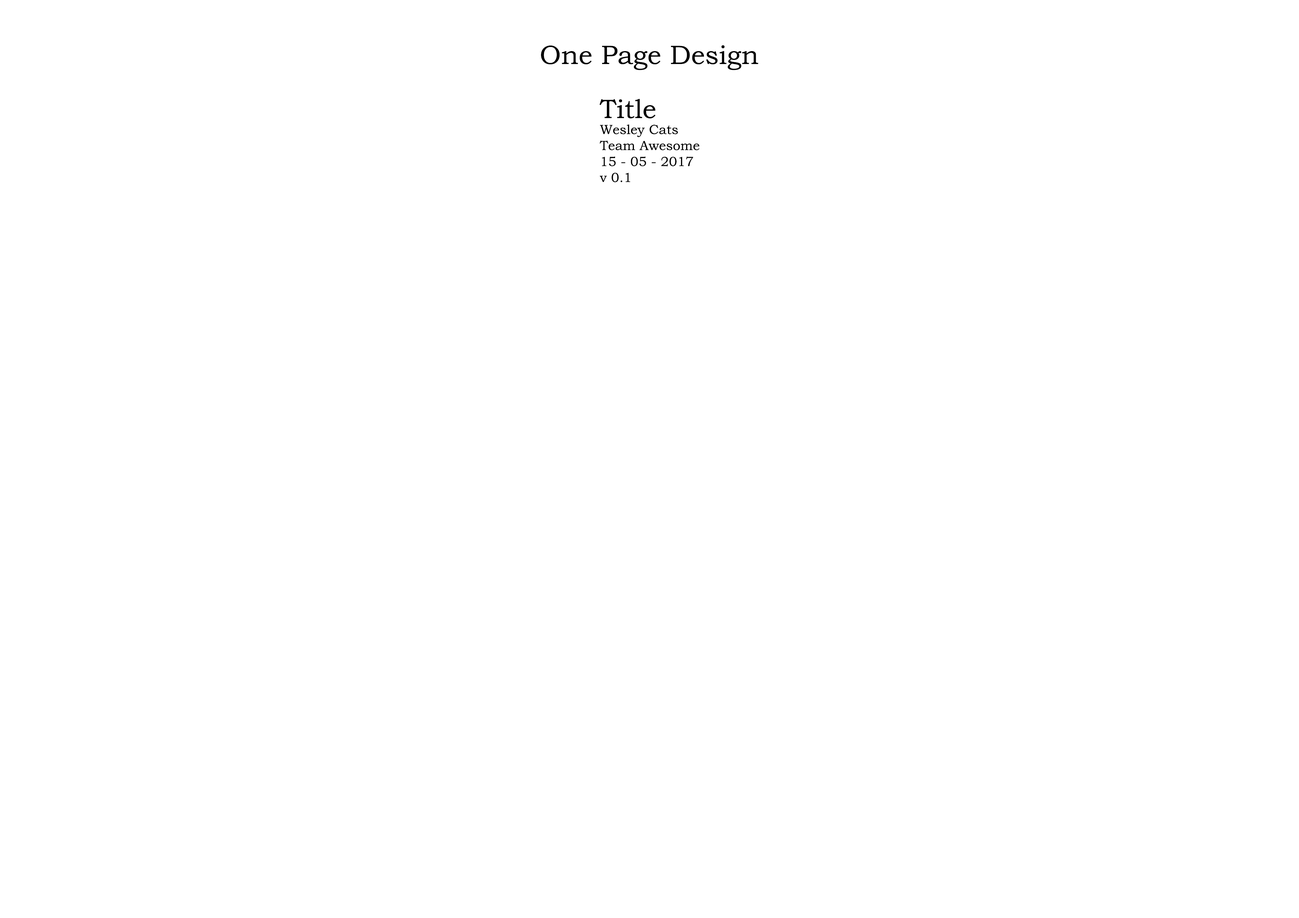
<style>
.page{position:relative;width:1299px;height:918px;background:#ffffff}
.page>*{position:absolute;margin:0}
.t1{font:26.7px "BookmanOldStyle";color:#000000}
.t2{font:13.3px "BookmanOldStyle";color:#000000}
</style>
<div class="page">
<p class="t1" style="left:541px;top:45px;width:217px;height:25px">One Page Design</p>
<p class="t2" style="left:599px;top:99px;width:100px;height:84px"><span class="t1">Title<br></span>Wesley Cats<br>Team Awesome<br>15 - 05 - 2017<br>v 0.1</p>
</div>
